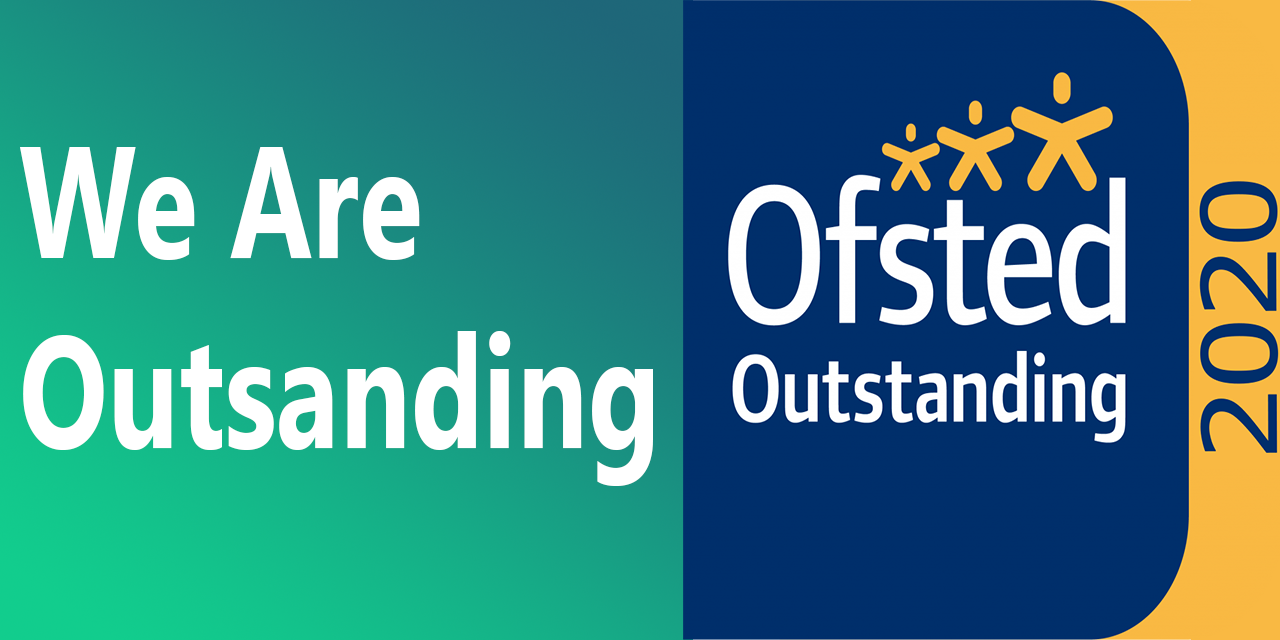
<style>
.page{position:relative;width:1280px;height:640px}
.page>*{position:absolute;margin:0}
.t1{font:157.8px "SegoeUI-Bold";color:#ffffff;scale:0.74 1}
</style>
<div class="page">
<p class="t1" style="left:20px;top:147px;width:633px;height:339px">We Are Outsanding Outstanding</p>
</div>
